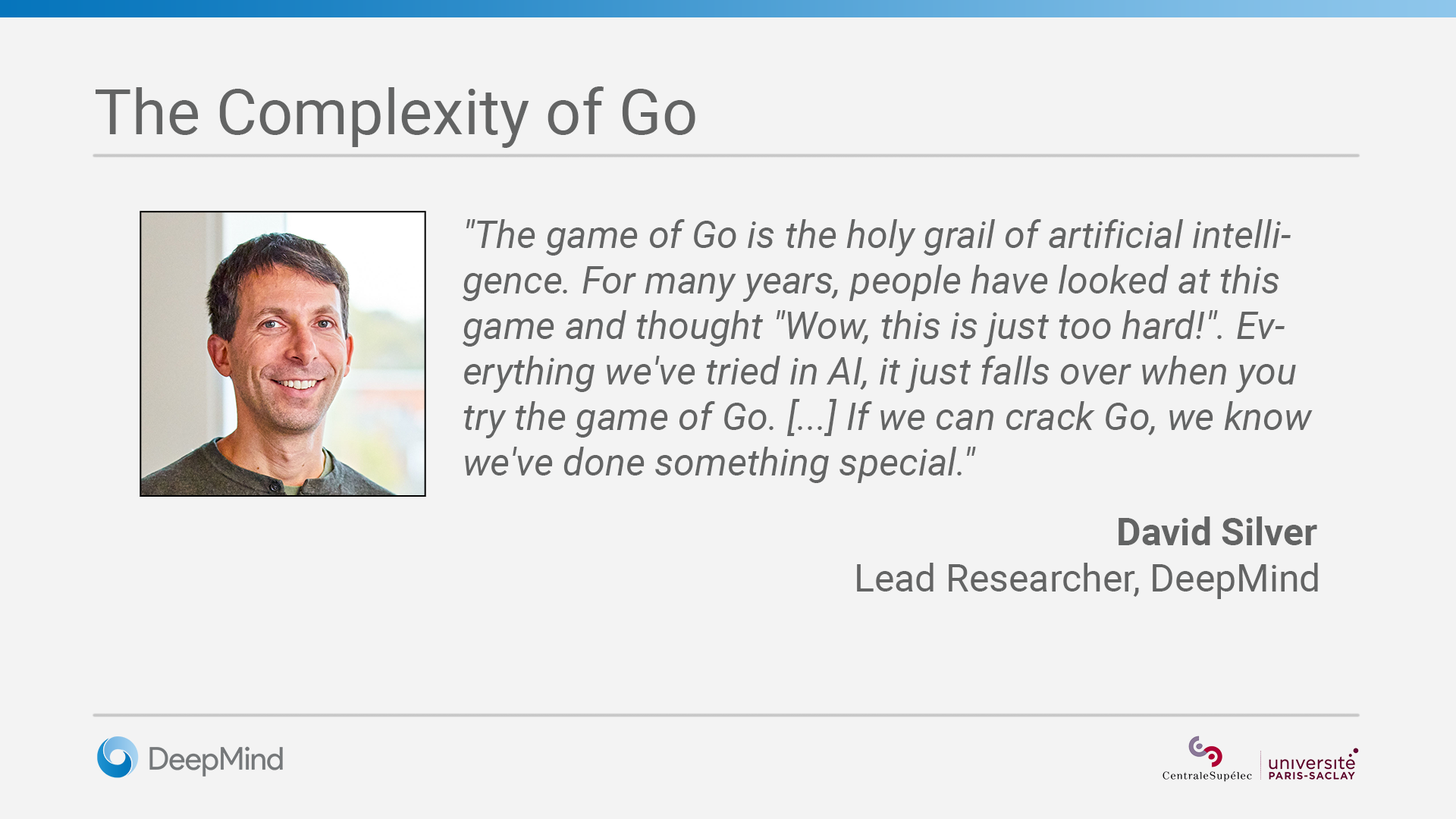
<style>
.page{position:relative;width:1456px;height:819px;background:#f3f3f3}
.page>*{position:absolute;margin:0}
.t1{font:63.2px "Roboto-Regular";color:#636464}
.t2{font:37.9px "Roboto-Italic";color:#636464}
.t3{font:37.9px "Roboto-Bold";color:#636464}
.t4{font:37.9px "Roboto-Regular";color:#636464}
</style>
<div class="page">
<p class="t1" style="left:96px;top:86px;width:599px;height:62px">The Complexity of Go</p>
<p class="t2" style="left:463px;top:219px;width:850px;height:264px">"The game of Go is the holy grail of artificial intelligence. For many years, people have looked at this game and thought "Wow, this is just too hard!". Everything we've tried in AI, it just falls over when you try the game of Go. [...] If we can crack Go, we know we've done something special."</p>
<p class="t3" style="left:1119px;top:516px;width:198px;height:29px">David Silver</p>
<p class="t4" style="left:857px;top:563px;width:461px;height:36px">Lead Researcher, DeepMind</p>
</div>
